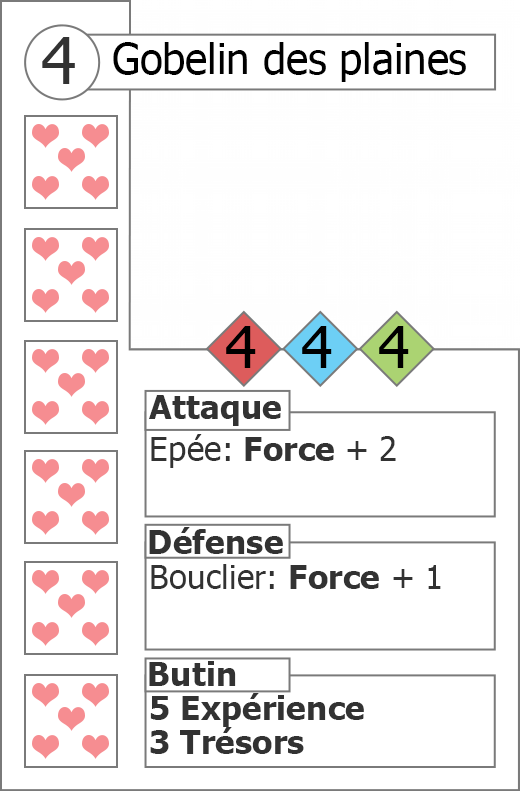
<style>
.page{position:relative;width:520px;height:791px;background:#ffffff}
.page>*{position:absolute;margin:0}
.t1{font:64.5px "Tahoma";color:#323232}
.t2{font:41.7px "Tahoma";color:#000000}
.t3{font:58.3px "Tahoma";color:#000000}
.t4{font:33.3px "Tahoma-Bold";color:#323232}
.t5{font:33.3px "Tahoma";color:#323232}
.t6{font:33.3px/33.3px "Tahoma-Bold";color:#323232}
</style>
<div class="page">
<p class="t1" style="left:42px;top:37px;width:33px;height:47px">4</p>
<p class="t2" style="left:113px;top:42px;width:353px;height:40px">Gobelin des plaines</p>
<p class="t3" style="left:226px;top:326px;width:30px;height:42px">4</p>
<p class="t3" style="left:302px;top:326px;width:30px;height:42px">4</p>
<p class="t3" style="left:379px;top:326px;width:30px;height:42px">4</p>
<p class="t4" style="left:149px;top:395px;width:132px;height:31px">Attaque</p>
<p class="t5" style="left:151px;top:434px;width:245px;height:34px">Epée:<span class="t4"> Force </span>+ 2</p>
<p class="t4" style="left:149px;top:527px;width:134px;height:27px">Défense</p>
<p class="t5" style="left:151px;top:564px;width:290px;height:25px">Bouclier: <span class="t4">Force</span> + 1</p>
<p class="t4" style="left:149px;top:661px;width:87px;height:25px">Butin</p>
<p class="t6" style="left:150px;top:693px;width:214px;height:61px">5 Expérience <br>3 Trésors</p>
</div>
